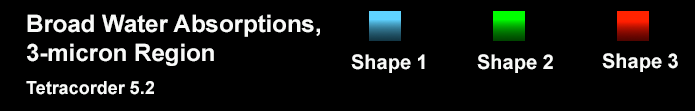
<style>
.page{position:relative;width:695px;height:111px;background:#000000}
.page>*{position:absolute;margin:0}
.t1{font:24px "Arial-BoldMT";color:#f9faf9}
.t2{font:18px "Arial-BoldMT";color:#f9faf9}
.t3{font:20px "Arial-BoldMT";color:#f9faf9}
</style>
<div class="page">
<p class="t1" style="left:26px;top:14px;width:294px;height:81px">Broad Water Absorptions,<br>3-micron Region<br><br><span class="t2">Tetracorder 5.2</span></p>
<p class="t3" style="left:351px;top:54px;width:74px;height:19px">Shape 1</p>
<p class="t3" style="left:477px;top:54px;width:76px;height:19px">Shape 2</p>
<p class="t3" style="left:602px;top:53px;width:76px;height:19px">Shape 3</p>
</div>
